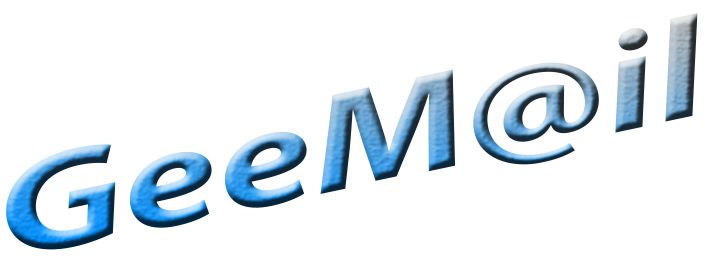
<style>
.page{position:relative;width:713px;height:280px;background:#ffffff}
.page>*{position:absolute;margin:0}
.t1{font:140px "MyriadPro-BoldIt";scale:1.36 1}
</style>
<div class="page">
<p class="t1" style="left:6px;top:13px;width:692px;height:237px;rotate:-12deg">GeeM@il</p>
</div>
